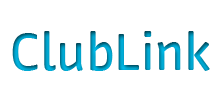
<style>
.page{position:relative;width:221px;height:100px;background:#ffffff}
.page>*{position:absolute;margin:0}
.t1{font:52px "Zaooqgawikahtzpfomowwlpqbyp"}
</style>
<div class="page">
<p class="t1" style="left:12px;top:31px;width:198px;height:40px">ClubLink</p>
</div>
